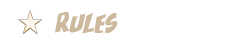
<style>
.page{position:relative;width:250px;height:45px;background:#ffffff}
.page>*{position:absolute;margin:0}
.t1{font:30px "HoustonComicsPersonalUse";color:#cdb99d}
</style>
<div class="page">
<p class="t1" style="left:55px;top:12px;width:63px;height:22px">RULES</p>
</div>
